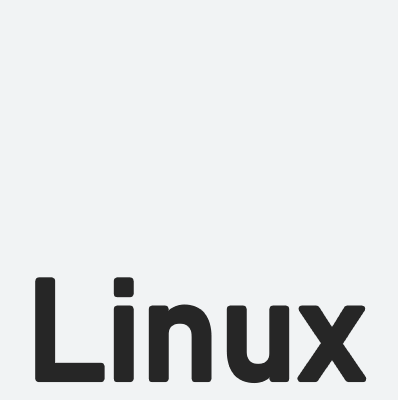
<style>
.page{position:relative;width:398px;height:400px;background:#f1f3f4}
.page>*{position:absolute;margin:0}
.t1{font:139.3px "Bahnschrift";color:#262626}
</style>
<div class="page">
<p class="t1" style="left:38px;top:280px;width:326px;height:101px">Linux</p>
</div>
